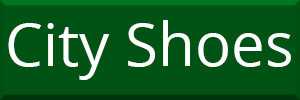
<style>
.page{position:relative;width:300px;height:100px;background:#005315}
.page>*{position:absolute;margin:0}
.t1{font:60px "OpenSans";color:#ffffff}
</style>
<div class="page">
<p class="t1" style="left:8px;top:20px;width:283px;height:60px">City Shoes</p>
</div>
